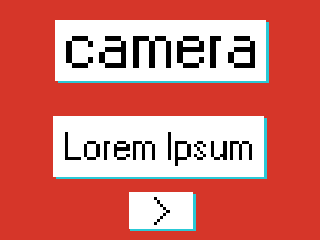
<style>
.page{position:relative;width:320px;height:240px;background:#d63629}
.page>*{position:absolute;margin:0}
.t1{font:67.1px "W95FARegular";color:#000000}
.t2{font:39.1px "W95FARegular";color:#000000}
</style>
<div class="page">
<p class="t1" style="left:66px;top:36px;width:189px;height:32px">camera</p>
<p class="t2" style="left:65px;top:132px;width:187px;height:34px">Lorem Ipsum</p>
<p class="t2" style="left:154px;top:197px;width:16px;height:28px">&gt;</p>
</div>
